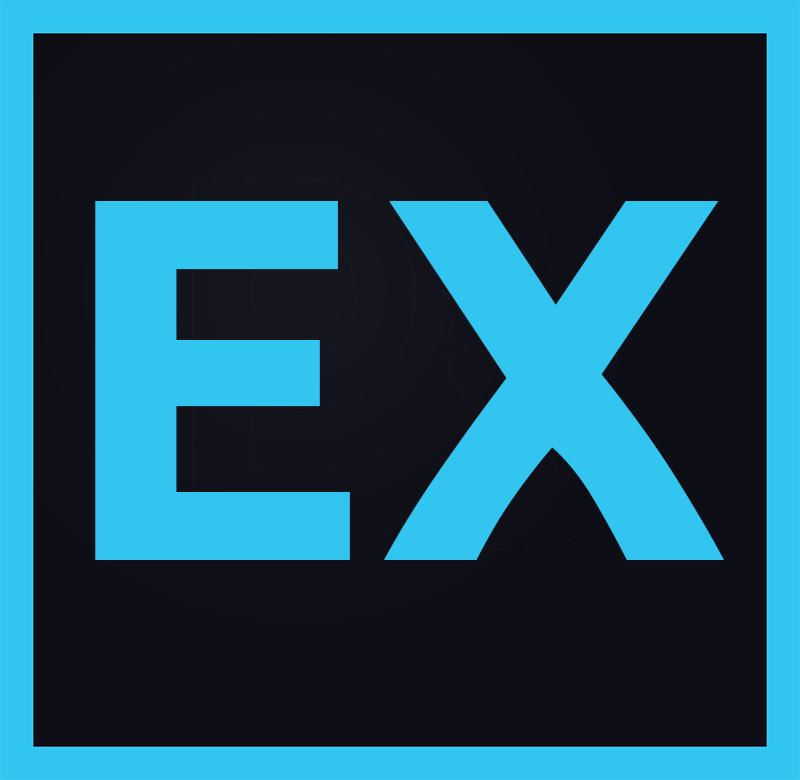
<style>
.page{position:relative;width:800px;height:780px;background:#31c5f0}
.page>*{position:absolute;margin:0}
.t1{font:518.4px "Ubuntu-Bold";color:#31c5f0}
</style>
<div class="page">
<p class="t1" style="left:95px;top:201px;width:629px;height:359px">EX</p>
</div>
